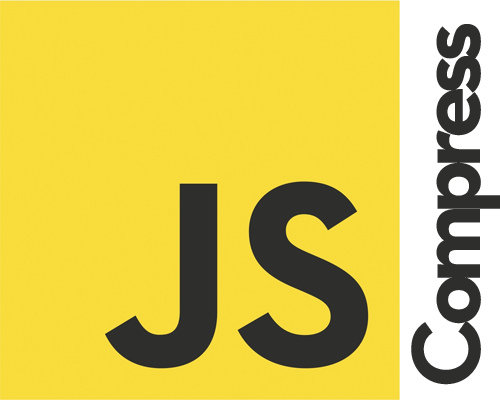
<style>
.page{position:relative;width:500px;height:400px;background:#f8dc3c}
.page>*{position:absolute;margin:0}
.t1{font:100px "NeutraTextTF-BoldAlt";letter-spacing:-0.1em;color:#2e2e2c}
</style>
<div class="page">
<p class="t1" style="left:411px;top:24px;width:91px;height:361px;rotate:-90deg">Compress</p>
</div>
